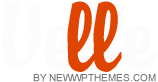
<style>
.page{position:relative;width:158px;height:82px;background:#ffffff}
.page>*{position:absolute;margin:0}
.t1{font:88px "TRBriquet";color:#df4400}
.t2{font:10px "ArialMT";color:#747474;text-transform:uppercase}
</style>
<div class="page">
<p class="t1" style="left:67px;top:1px;width:55px;height:71px">ll</p>
<p class="t2" style="left:33px;top:74px;width:123px;height:8px">by NewWpThemes.com</p>
</div>
